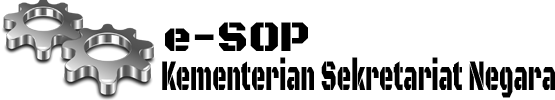
<style>
.page{position:relative;width:555px;height:100px;background:#ffffff}
.page>*{position:absolute;margin:0}
.t1{font:43.6px "BlackOpsOne-Regular";color:#000000}
.t2{font:42.2px "BlackOpsOne-Regular";color:#000000;scale:0.52 1}
</style>
<div class="page">
<p class="t1" style="left:165px;top:22px;width:143px;height:29px">e-SOP</p>
<p class="t2" style="left:162px;top:57px;width:393px;height:41px">Kementerian Sekretariat Negara</p>
</div>
